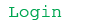
<style>
.page{position:relative;width:100px;height:25px;background:#ffffff}
.page>*{position:absolute;margin:0}
.t1{font:18px "MiriamFixed";color:#00a651}
</style>
<div class="page">
<p class="t1" style="left:9px;top:5px;width:53px;height:15px">Login</p>
</div>
